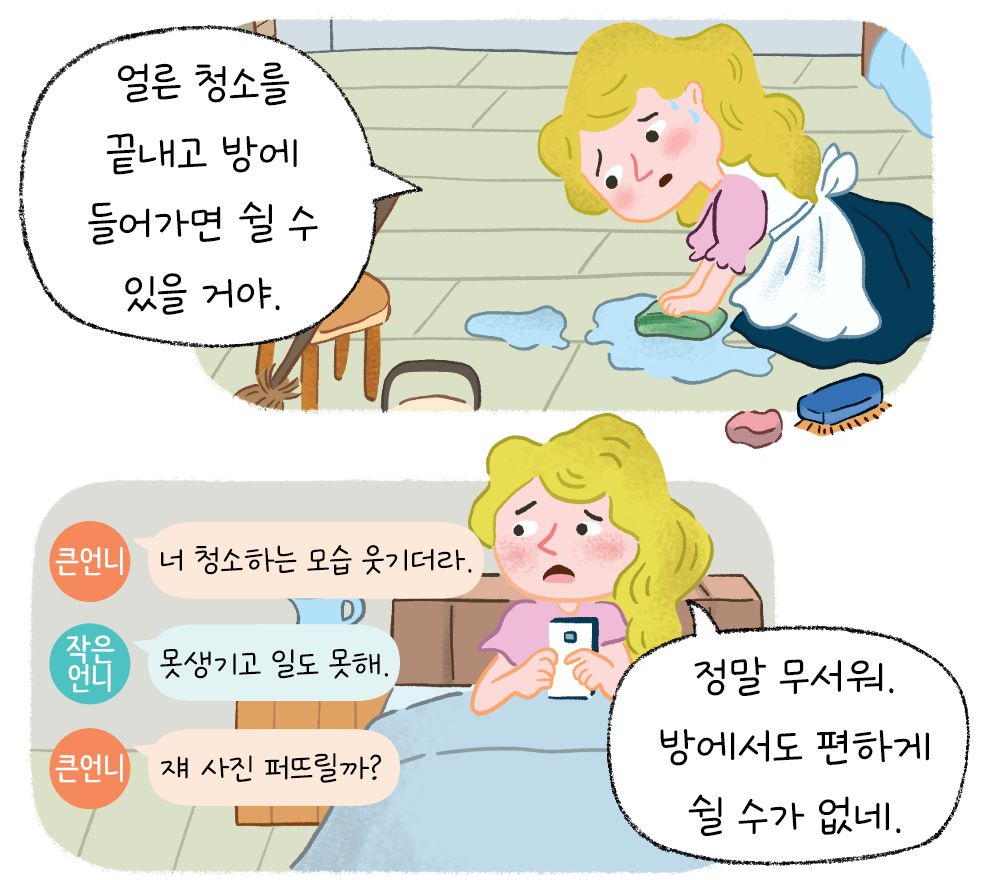
<style>
.page{position:relative;width:1000px;height:880px;background:#ffffff}
.page>*{position:absolute;margin:0}
.t1{font:58.3px "GangwonEduSaeeumMedium";color:#000000}
.t2{font:43.8px "GangwonEduSaeeumMedium";color:#000000}
.t3{font:31.2px "NanumBarunpen-Bold";color:#ffffff}
.t4{font:31.2px/29.2px "NanumBarunpen-Bold";color:#ffffff}
</style>
<div class="page">
<p class="t1" style="left:88px;top:62px;width:230px;height:253px;text-align:center">얼른 청소를<br>끝내고 방에<br>들어가면 쉴 수<br>있을 거야.</p>
<p class="t2" style="left:161px;top:545px;width:311px;height:31px">너 청소하는 모습 웃기더라.</p>
<p class="t3" style="left:55px;top:547px;width:68px;height:29px">큰언니</p>
<p class="t4" style="left:66px;top:635px;width:49px;height:58px;text-align:center">작은<br>언니</p>
<p class="t2" style="left:160px;top:649px;width:228px;height:30px">못생기고 일도 못해.</p>
<p class="t1" style="left:660px;top:656px;width:269px;height:180px;text-align:center">정말 무서워.<br>방에서도 편하게<br>쉴 수가 없네.</p>
<p class="t3" style="left:55px;top:754px;width:68px;height:29px">큰언니</p>
<p class="t2" style="left:161px;top:753px;width:220px;height:30px">쟤 사진 퍼뜨릴까?</p>
</div>
